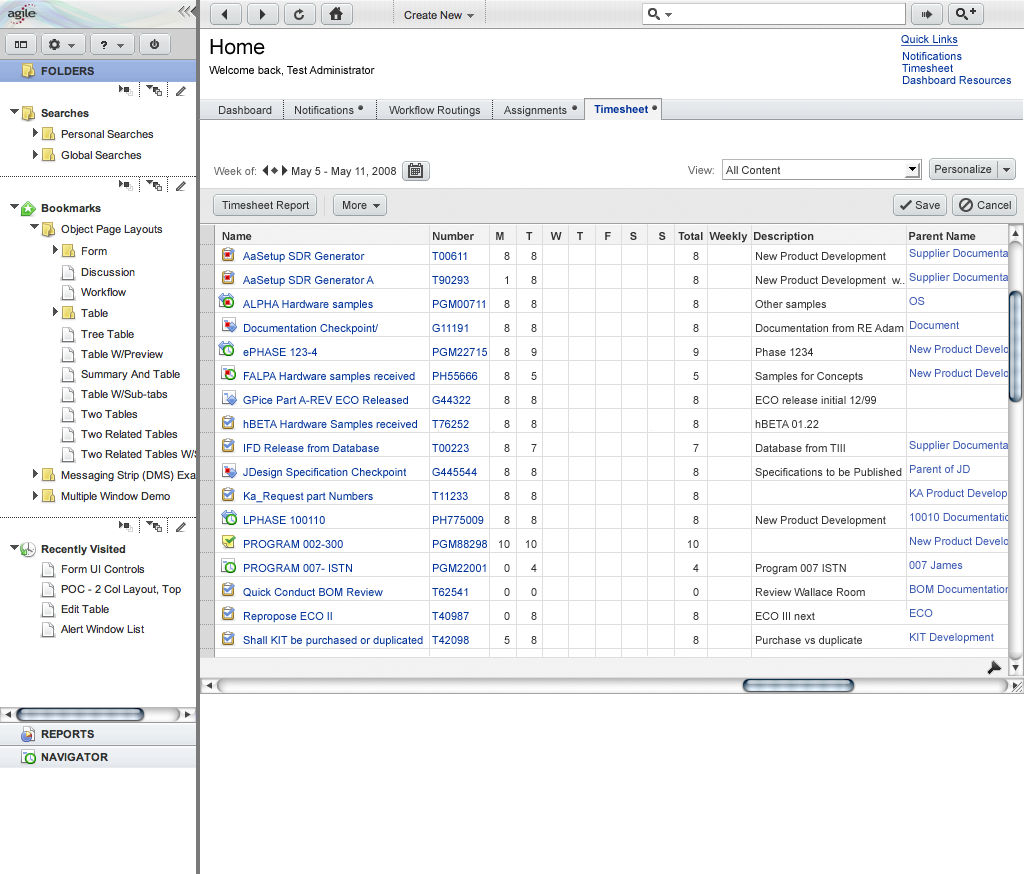
<style>
.page{position:relative;width:1024px;height:874px;background:#ffffff}
.page>*{position:absolute;margin:0}
.t1{font:11px/20px "ArialMT";color:#000000}
.t2{font:21px/20px "ArialMT";color:#000000}
.t3{font:11px "ArialMT";color:#003399;text-decoration:underline}
.t4{font:11px/12px "ArialMT";color:#003399}
.t5{font:11px "ArialMT";color:#333333}
.t6{font:11px "Arial-BoldMT";color:#003399}
.t7{font:11px "ArialMT";color:#666666}
.t8{font:11px "ArialMT";letter-spacing:0.005em;color:#666666}
.t9{font:11px "ArialMT";letter-spacing:0.005em;color:#303030}
.t10{font:11px "ArialMT";color:#303030}
.t11{font:11px "Arial-BoldMT";color:#303030}
.t12{font:11px/24px "ArialMT";color:#003399}
.t13{font:11px/24px "ArialMT";color:#333333}
</style>
<div class="page">
<p class="t1" style="left:209px;top:39px;width:166px;height:37px"><span class="t2">Home<br></span>Welcome back, Test Administrator</p>
<p class="t3" style="left:901px;top:35px;width:57px;height:11px">Quick Links</p>
<p class="t4" style="left:902px;top:52px;width:109px;height:32px">Notifications<br>Timesheet<br>Dashboard Resources</p>
<p class="t5" style="left:219px;top:106px;width:53px;height:8px">Dashboard</p>
<p class="t5" style="left:295px;top:106px;width:59px;height:8px">Notifications</p>
<p class="t5" style="left:389px;top:106px;width:91px;height:11px">Workflow Routings</p>
<p class="t5" style="left:504px;top:106px;width:63px;height:11px">Assignments</p>
<p class="t6" style="left:594px;top:105px;width:54px;height:8px">Timesheet</p>
<p class="t7" style="left:214px;top:167px;width:42px;height:8px">Week of:</p>
<p class="t5" style="left:292px;top:167px;width:104px;height:11px">May 5 - May 11, 2008</p>
<p class="t8" style="left:688px;top:166px;width:26px;height:8px">View:</p>
<p class="t9" style="left:726px;top:166px;width:55px;height:8px">All Content</p>
<p class="t10" style="left:935px;top:165px;width:57px;height:8px">Personalize</p>
<p class="t10" style="left:222px;top:201px;width:87px;height:11px">Timesheet Report</p>
<p class="t10" style="left:343px;top:201px;width:24px;height:8px">More</p>
<p class="t10" style="left:915px;top:201px;width:25px;height:8px">Save</p>
<p class="t10" style="left:977px;top:201px;width:34px;height:8px">Cancel</p>
<p class="t11" style="left:222px;top:232px;width:754px;height:11px">Name                                                           Number       M       T      W     T       F      S       S    Total  Weekly  Description                               Parent Name</p>
<p class="t12" style="left:243px;top:252px;width:180px;height:395px">AaSetup SDR Generator<br>AaSetup SDR Generator A<br>ALPHA Hardware samples<br>Documentation Checkpoint/<br>ePHASE 123-4<br>FALPA Hardware samples received<br>GPice Part A-REV ECO Released<br>hBETA Hardware Samples received<br>IFD Release from Database<br>JDesign Specification Checkpoint<br>Ka_Request part Numbers<br>LPHASE 100110<br>PROGRAM 002-300<br>PROGRAM 007- ISTN<br>Quick Conduct BOM Review<br>Repropose ECO II<br>Shall KIT be purchased or duplicated</p>
<p class="t12" style="left:432px;top:252px;width:55px;height:392px">T00611<br>T90293<br>PGM00711<br>G11191<br>PGM22715<br>PH55666<br>G44322<br>T76252<br>T00223<br>G445544<br>T11233<br>PH775009<br>PGM88298<br>PGM22001<br>T62541<br>T40987<br>T42098</p>
<p class="t13" style="left:499px;top:252px;width:11px;height:392px;text-align:right">8<br>1<br>8<br>8<br>8<br>8<br>8<br>8<br>8<br>8<br>8<br>8<br>10<br>0<br>0<br>0<br>5</p>
<p class="t13" style="left:526px;top:252px;width:11px;height:392px;text-align:right">8<br>8<br>8<br>8<br>9<br>5<br>8<br>8<br>7<br>8<br>8<br>8<br>10<br>4<br>0<br>8<br>8</p>
<p class="t13" style="left:688px;top:252px;width:11px;height:392px;text-align:right">8<br>8<br>8<br>8<br>9<br>5<br>8<br>8<br>7<br>8<br>8<br>8<br>10<br>4<br>0<br>8<br>8</p>
<p class="t13" style="left:755px;top:252px;width:150px;height:395px">New Product Development <br>New Product Development  w..<br>Other samples<br>Documentation from RE Adam<br>Phase 1234<br>Samples for Concepts<br>ECO release initial 12/99<br>hBETA 01.22<br>Database from TIII<br>Specifications to be Published<br><br>New Product Development<br><br>Program 007 ISTN<br>Review Wallace Room<br>ECO III next<br>Purchase vs duplicate</p>
</div>
